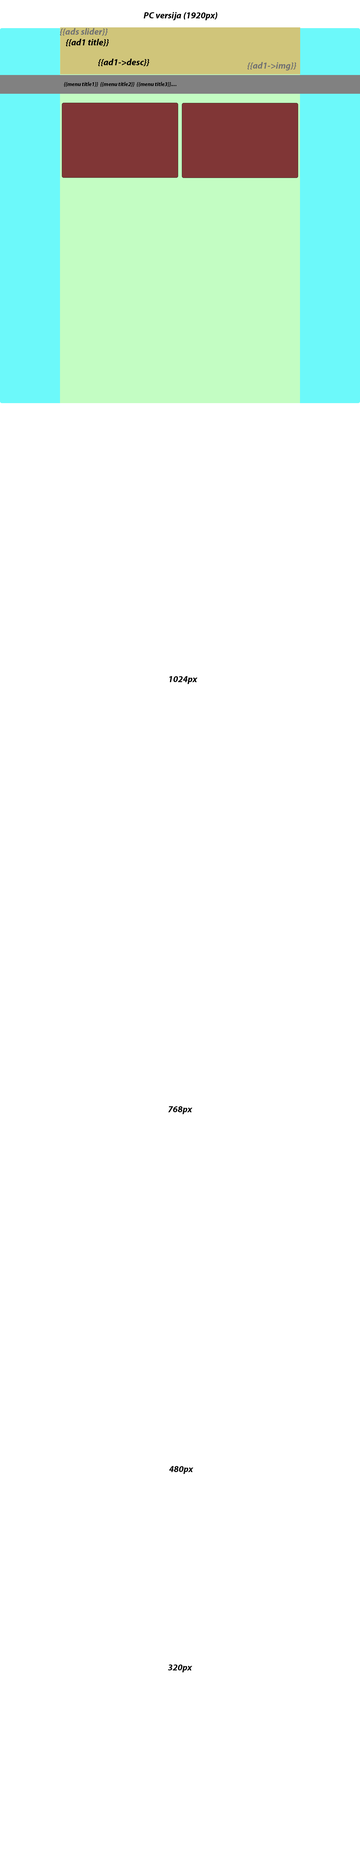
<style>
.page{position:relative;width:360px;height:1875px;background:#ffffff}
.page>*{position:absolute;margin:0}
.t1{font:9px "MyriadPro-BoldIt";color:#000000}
.t2{font:9px "MyriadPro-BoldIt";color:#727272}
.t3{font:5.6px "MyriadPro-BoldIt";color:#000000}
.t4{font:9px "MyriadPro-BoldIt";color:#090909}
</style>
<div class="page">
<p class="t1" style="left:144px;top:12px;width:73px;height:8px">PC versija (1920px)</p>
<p class="t2" style="left:60px;top:28px;width:48px;height:8px">{{ads slider}}</p>
<p class="t1" style="left:66px;top:39px;width:43px;height:7px">{{ad1 title}}</p>
<p class="t1" style="left:98px;top:59px;width:51px;height:7px">{{ad1-&gt;desc}}</p>
<p class="t2" style="left:248px;top:62px;width:48px;height:8px">{{ad1-&gt;img}}</p>
<p class="t3" style="left:64px;top:82px;width:112px;height:5px">{{menu title1}}  {{menu title2}}  {{menu title3}}....</p>
<p class="t1" style="left:170px;top:676px;width:27px;height:8px">1024px</p>
<p class="t4" style="left:168px;top:1106px;width:24px;height:8px">768px</p>
<p class="t4" style="left:169px;top:1466px;width:24px;height:8px">480px</p>
<p class="t4" style="left:168px;top:1664px;width:24px;height:8px">320px</p>
</div>
